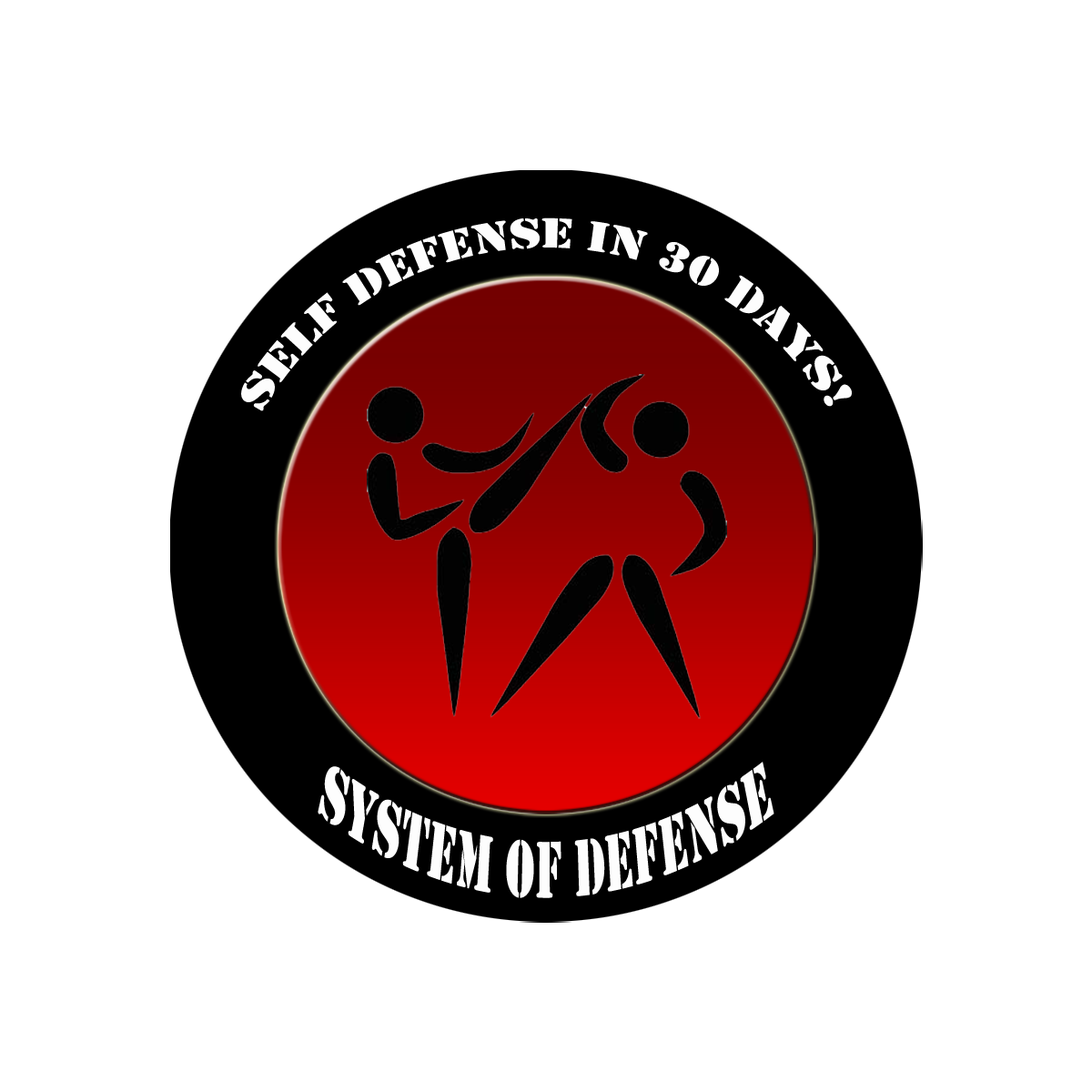
<style>
.page{position:relative;width:1092px;height:1092px;background:#ffffff}
.page>*{position:absolute;margin:0}
.t1{font:44.1px "Stencil";color:#fdfdfd}
.t2{font:84.4px "Stencil";color:#fdfdfd;scale:0.53 1}
</style>
<div class="page">
<p class="t1" style="left:241px;top:217px;width:611px;height:194px">Self Defense in 30 Days!</p>
<p class="t2" style="left:318px;top:762px;width:456px;height:136px">System of Defense</p>
</div>
